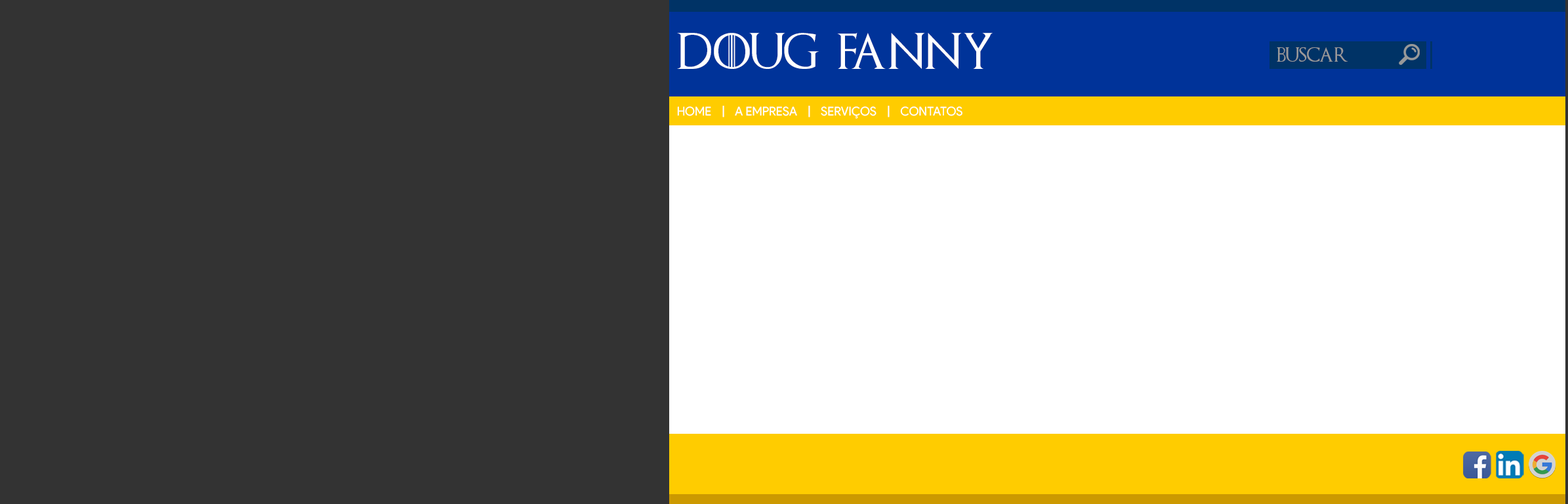
<style>
.page{position:relative;width:1568px;height:504px;background:#333333}
.page>*{position:absolute;margin:0}
.t1{font:35.9px "GameofThrones";color:#ffffff}
.t2{font:14.5px "GameofThrones";color:#999999}
.t3{font:12.1px "ProductSans-Regular";color:#ffffff}
</style>
<div class="page">
<p class="t1" style="left:677px;top:33px;width:316px;height:36px">DOUG  FANNY</p>
<p class="t2" style="left:1277px;top:47px;width:71px;height:15px">BUSCAR</p>
<p class="t3" style="left:677px;top:106px;width:285px;height:13px">HOME    |    A EMPRESA    |    SERVIÇOS    |    CONTATOS</p>
</div>
